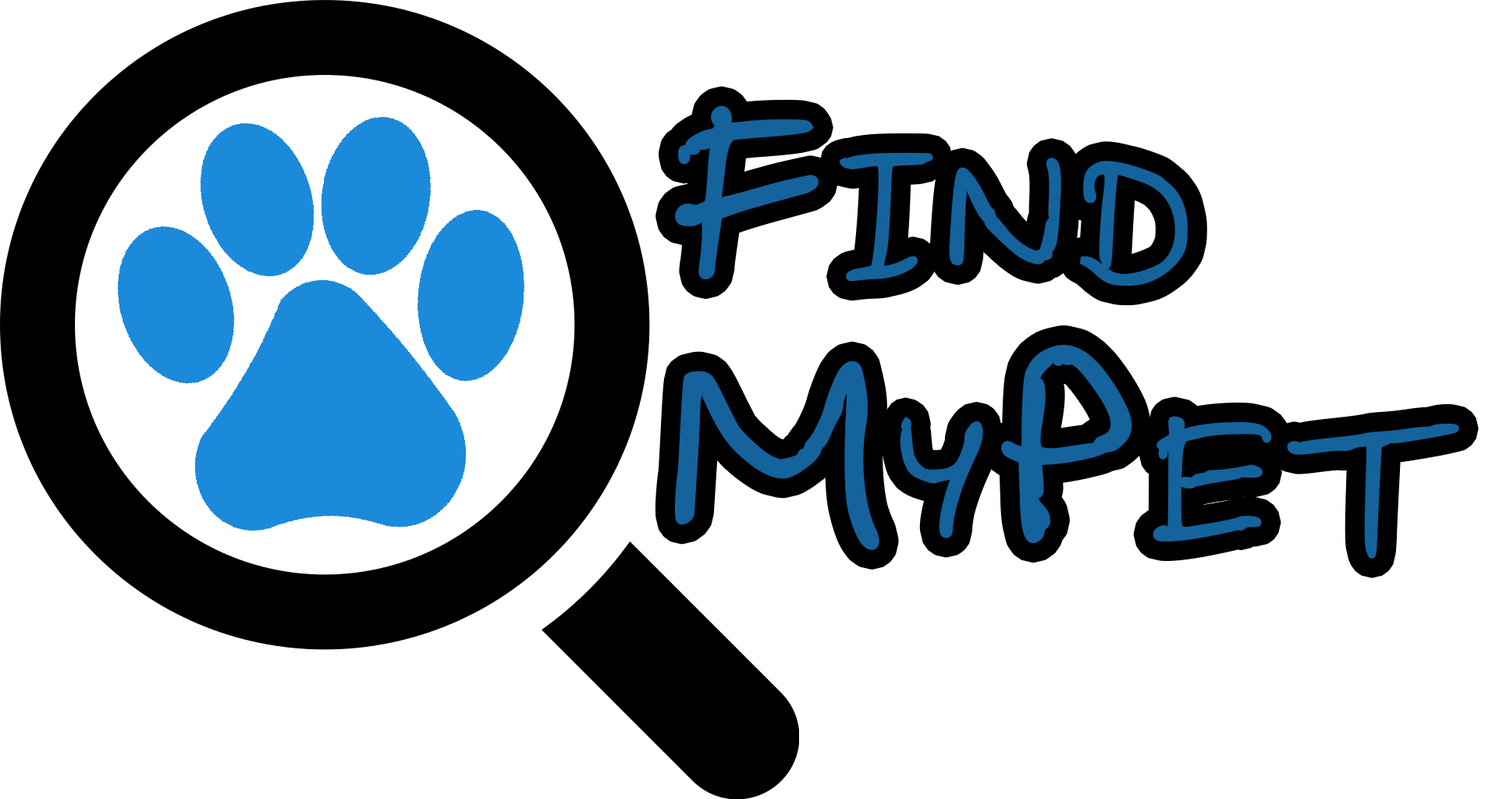
<style>
.page{position:relative;width:1492px;height:799px;background:#ffffff}
.page>*{position:absolute;margin:0}
.t1{font:390.2px "Shin";color:#14639d;font-variant:small-caps;font-weight:bold}
</style>
<div class="page">
<p class="t1" style="left:674px;top:105px;width:785px;height:454px">Find<br>MyPet</p>
</div>
